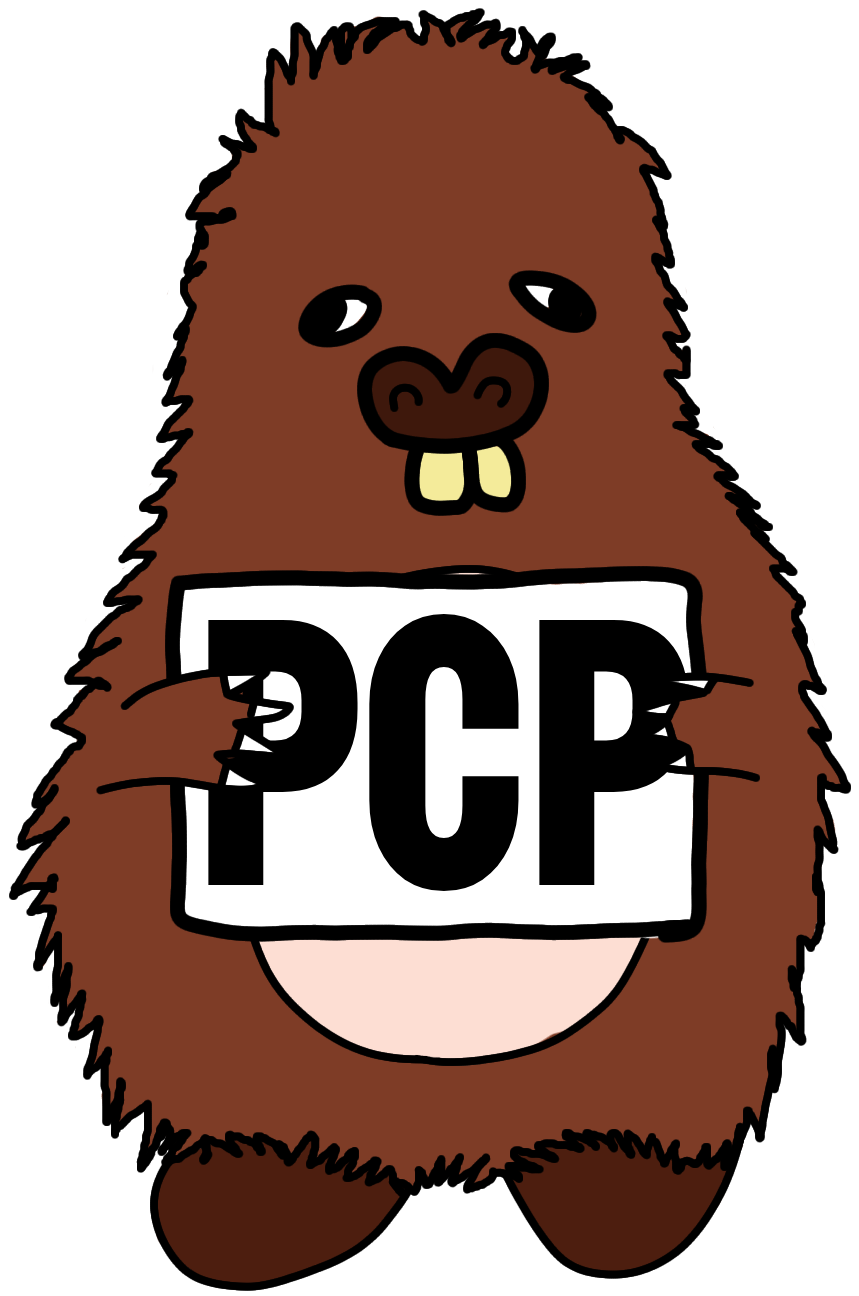
<style>
.page{position:relative;width:859px;height:1296px;background:#ffffff}
.page>*{position:absolute;margin:0}
.t1{font:378.5px "BBHSansBogle-Regular";color:#000000}
</style>
<div class="page">
<p class="t1" style="left:208px;top:614px;width:481px;height:277px">pcP</p>
</div>
